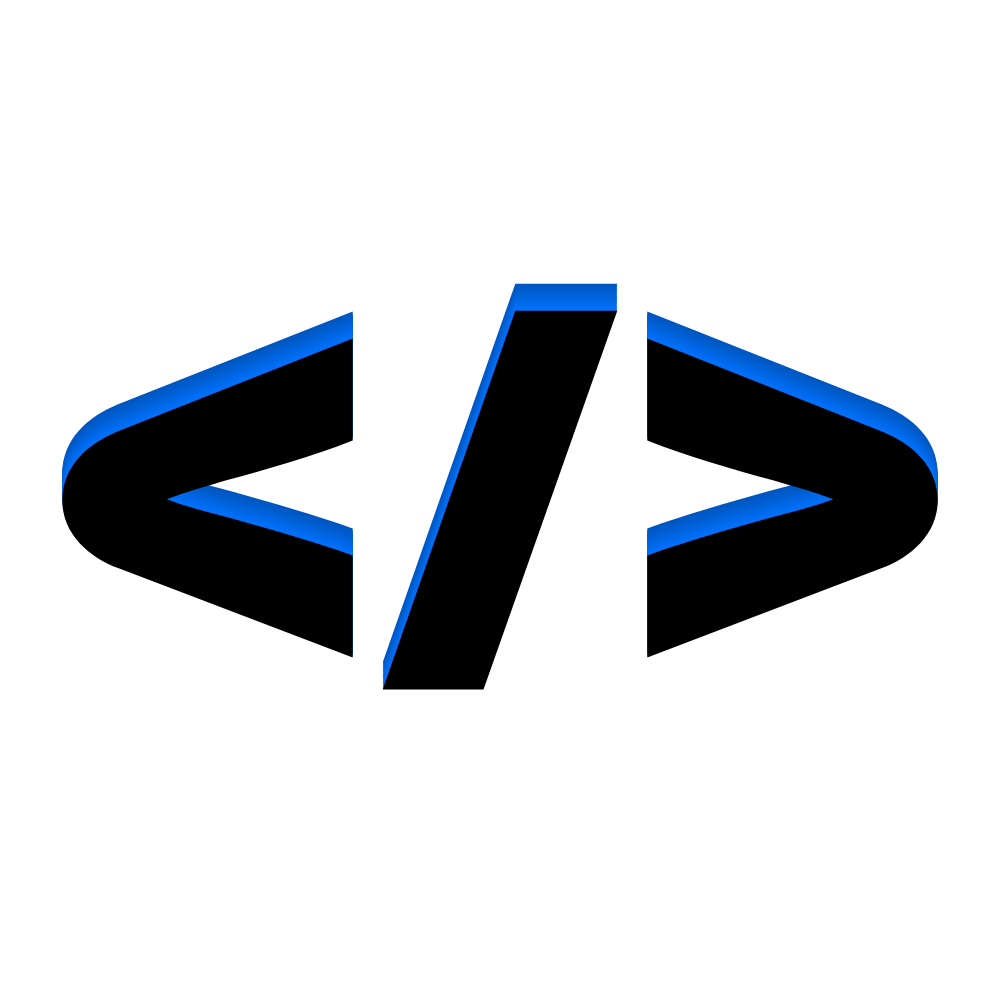
<style>
.page{position:relative;width:1000px;height:1000px;background:#ffffff}
.page>*{position:absolute;margin:0}
.t1{font:600px "SpinCycleOT";color:#000000}
</style>
<div class="page">
<p class="t1" style="left:62px;top:310px;width:876px;height:380px">&lt;/&gt;</p>
</div>
